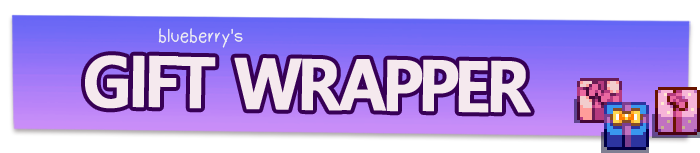
<style>
.page{position:relative;width:700px;height:153px;background:#ffffff}
.page>*{position:absolute;margin:0}
.t1{font:20px "Dudu_Calligraphy";color:#f2f2f2}
.t2{font:70px "MalgunGothicBold";letter-spacing:-0.06em;color:#f5e9ee;text-transform:uppercase;font-weight:bold;scale:0.95 1}
</style>
<div class="page">
<p class="t1" style="left:158px;top:28px;width:85px;height:20px">blueberry's</p>
<p class="t2" style="left:85px;top:55px;width:446px;height:58px;rotate:1deg">gift wrapper</p>
</div>
